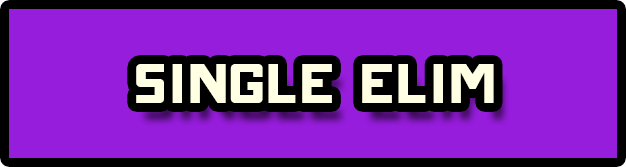
<style>
.page{position:relative;width:626px;height:167px;background:#971ddd}
.page>*{position:absolute;margin:0}
.t1{font:90px "ONRAMP";color:#ffffe3}
</style>
<div class="page">
<p class="t1" style="left:136px;top:64px;width:358px;height:39px">single Elim</p>
</div>
